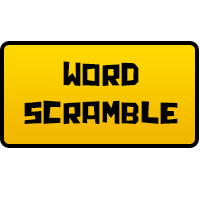
<style>
.page{position:relative;width:200px;height:205px;background:#ffffff}
.page>*{position:absolute;margin:0}
.t1{font:32px "Chunq";letter-spacing:0.04em;color:#000000}
</style>
<div class="page">
<p class="t1" style="left:24px;top:61px;width:154px;height:63px;text-align:center">WORD<br>SCRAMBLE</p>
</div>
